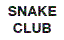
<style>
.page{position:relative;width:64px;height:40px;background:#ffffff}
.page>*{position:absolute;margin:0}
.t1{font:14px "Helvetica-Bold"}
</style>
<div class="page">
<p class="t1" style="left:8px;top:6px;width:49px;height:27px;text-align:center">SNAKE<br>CLUB</p>
</div>
